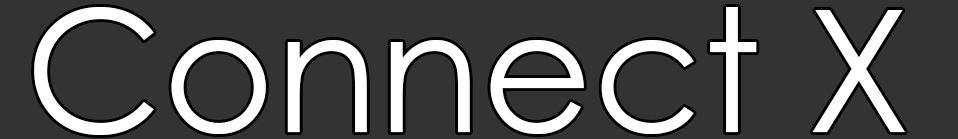
<style>
.page{position:relative;width:958px;height:139px;background:#333333}
.page>*{position:absolute;margin:0}
.t1{font:170px "CenturyGothic";color:#ffffff}
</style>
<div class="page">
<p class="t1" style="left:34px;top:7px;width:871px;height:128px">Connect X</p>
</div>
